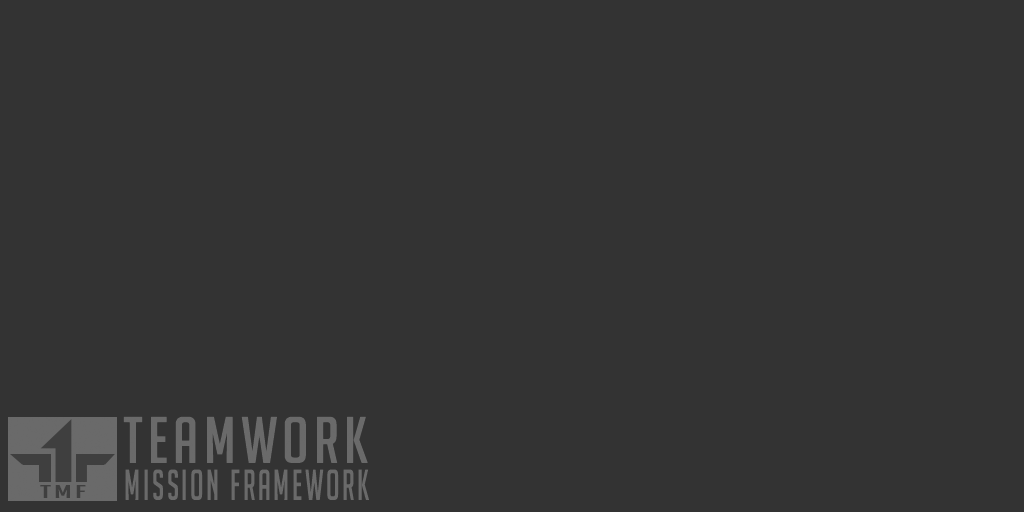
<style>
.page{position:relative;width:1024px;height:512px;background:#333333}
.page>*{position:absolute;margin:0}
.t1{font:64.4px "BigNoodleTitling";letter-spacing:0.08em;color:#6a6a6a}
.t2{font:42.5px "BigNoodleTitling";letter-spacing:0.08em;color:#6a6a6a;scale:0.79 1}
.t3{font:18.2px "BigNoodleTitling";letter-spacing:0.08em;color:#575757;scale:2.02 1}
</style>
<div class="page">
<p class="t1" style="left:123px;top:416px;width:245px;height:47px">teamwork</p>
<p class="t2" style="left:125px;top:469px;width:244px;height:31px">MISSION FRAMEWORK</p>
<p class="t3" style="left:40px;top:485px;width:46px;height:13px">TMF</p>
</div>
